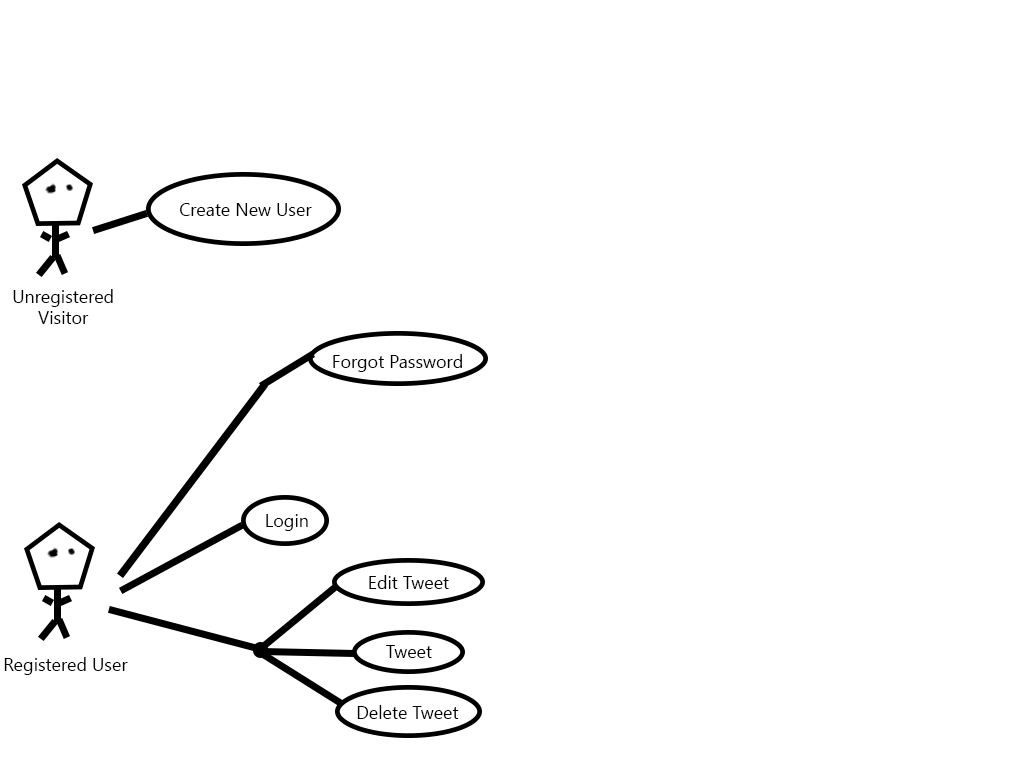
<style>
.page{position:relative;width:1024px;height:768px;background:#ffffff}
.page>*{position:absolute;margin:0}
.t1{font:18px "SegoeUISymbol";color:#000000}
</style>
<div class="page">
<p class="t1" style="left:180px;top:203px;width:132px;height:13px">Create New User</p>
<p class="t1" style="left:13px;top:289px;width:100px;height:35px;text-align:center">Unregistered Visitor</p>
<p class="t1" style="left:333px;top:354px;width:129px;height:18px">Forgot Password</p>
<p class="t1" style="left:266px;top:514px;width:42px;height:17px">Login</p>
<p class="t1" style="left:369px;top:575px;width:80px;height:14px">Edit Tweet</p>
<p class="t1" style="left:386px;top:645px;width:46px;height:13px">Tweet</p>
<p class="t1" style="left:4px;top:657px;width:124px;height:18px">Registered User</p>
<p class="t1" style="left:357px;top:705px;width:102px;height:14px">Delete Tweet</p>
</div>
